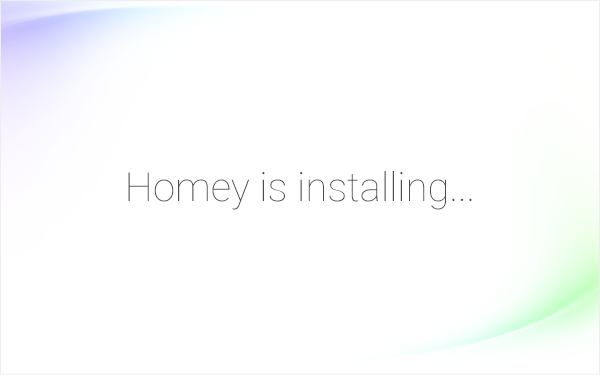
<style>
.page{position:relative;width:600px;height:375px;background:#ffffff}
.page>*{position:absolute;margin:0}
.t1{font:40px "Roboto-Thin";color:#4d4d4e}
</style>
<div class="page">
<p class="t1" style="left:128px;top:171px;width:344px;height:39px">Homey is installing...</p>
</div>
